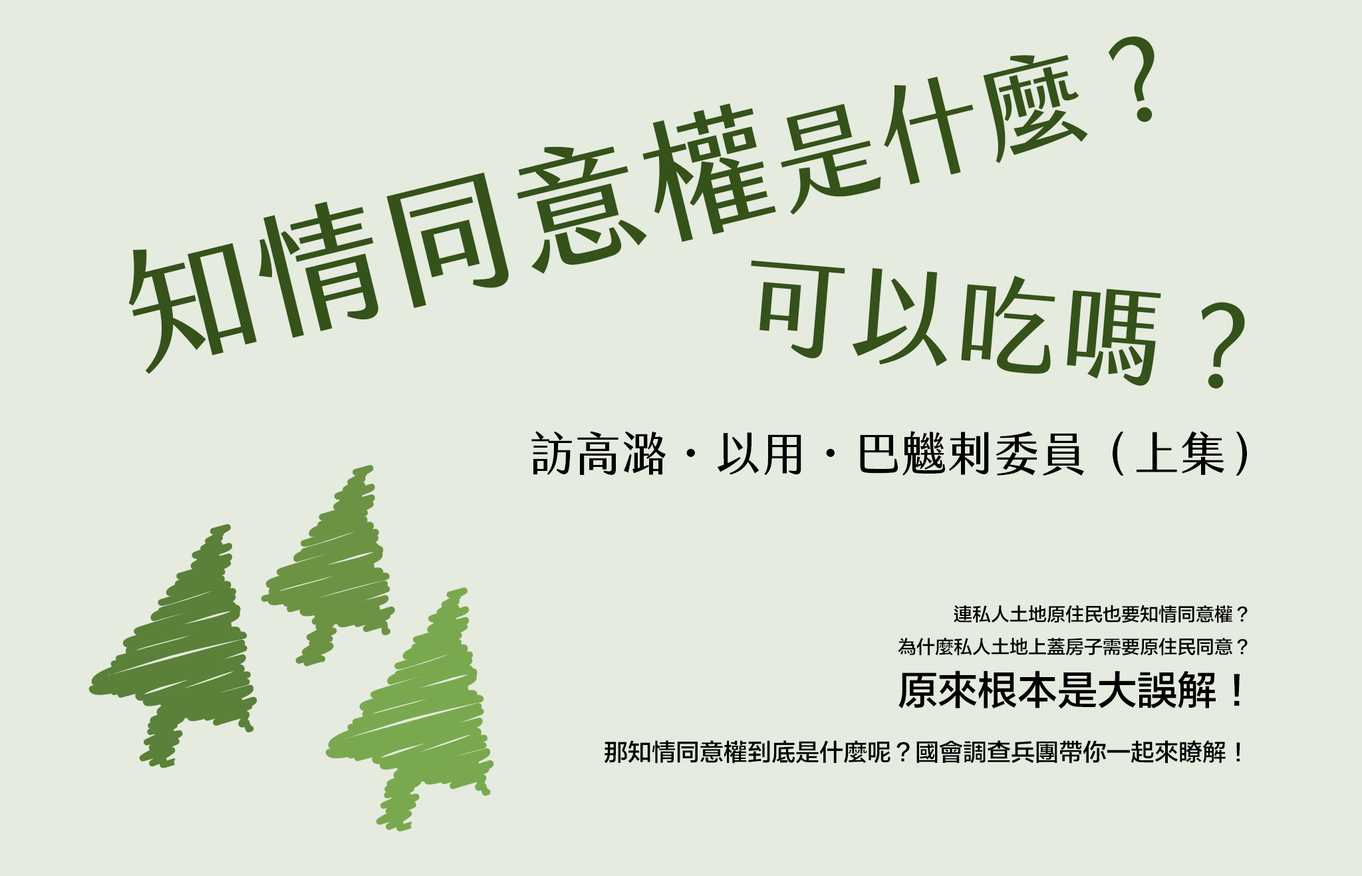
<style>
.page{position:relative;width:1362px;height:876px;background:#e5ebde}
.page>*{position:absolute;margin:0}
.t1{font:133px "jf-jinxuan-fresh-Medium";color:#345219}
.t2{font:106.4px "jf-jinxuan-fresh-Medium";color:#345219}
.t3{font:46.5px "jf-jinxuan-fresh-Medium";color:#000000}
.t4{font:18.6px "FZLTZHB--B51-0";color:#000000}
.t5{font:39.9px "FZLTZHB--B51-0";color:#000000}
.t6{font:23.9px "FZLTZHB--B51-0";color:#000000}
</style>
<div class="page">
<p class="t1" style="left:128px;top:36px;width:1026px;height:338px;rotate:-14deg">知情同意權<span class="t2">是什麼？</span></p>
<p class="t2" style="left:751px;top:260px;width:494px;height:129px;rotate:5deg">可以吃嗎？</p>
<p class="t3" style="left:531px;top:431px;width:716px;height:44px">訪高潞·以用·巴魕剌委員（上集）</p>
<p class="t4" style="left:604px;top:604px;width:643px;height:159px;text-align:right">連私人土地原住民也要知情同意權？ <br>為什麼私人土地上蓋房子需要原住民同意？ <br><span class="t5">原來根本是大誤解！<br></span><span class="t6">那知情同意權到底是什麼呢？國會調查兵團帶你一起來瞭解！</span></p>
</div>
